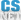
<style>
.page{position:relative;width:21px;height:20px}
.page>*{position:absolute;margin:0}
.t1{font:14px "Coda-Heavy";letter-spacing:-0.05em;color:#3399cc}
.t2{font:8.9px "Colleged";letter-spacing:-0.05em;color:#ffffff}
.t3{font:1.5px "Coda-Heavy";letter-spacing:-0.05em;color:#ffffff}
</style>
<div class="page">
<p class="t1" style="left:1px;top:0px;width:9px;height:12px">C</p>
<p class="t1" style="left:11px;top:0px;width:9px;height:12px">S</p>
<p class="t2" style="left:0px;top:11px;width:22px;height:10px"><span class="t3">.</span>net</p>
</div>
